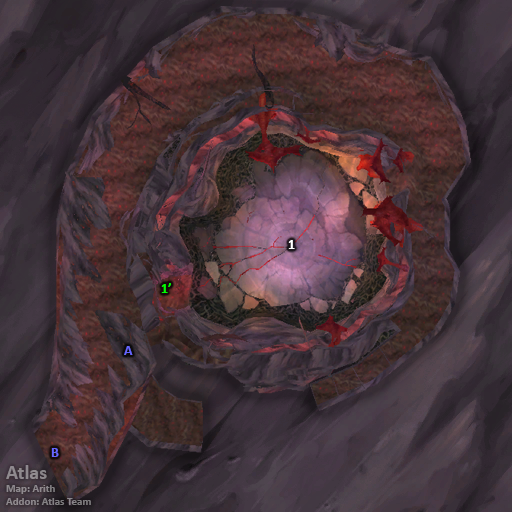
<style>
.page{position:relative;width:512px;height:512px}
.page>*{position:absolute;margin:0}
.t1{font:14px "Calibri-Bold";color:#ffffff}
.t2{font:14px "Calibri-Bold";color:#00ff00}
.t3{font:14px "Calibri-Bold";color:#6666ff}
.t4{font:11px "Calibri-Bold";color:#8e898e}
.t5{font:20px "Calibri-Bold";color:#8e898e}
</style>
<div class="page">
<p class="t1" style="left:288px;top:240px;width:7px;height:9px">1</p>
<p class="t2" style="left:161px;top:283px;width:10px;height:10px">1’</p>
<p class="t3" style="left:124px;top:346px;width:9px;height:9px">A</p>
<p class="t3" style="left:51px;top:448px;width:8px;height:9px">B</p>
<p class="t4" style="left:6px;top:465px;width:85px;height:40px"><span class="t5">Atlas<br></span>Map: Arith<br>Addon: Atlas Team</p>
</div>
